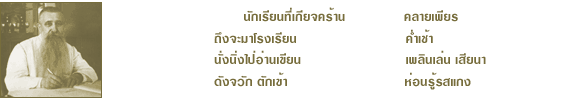
<style>
.page{position:relative;width:575px;height:100px;background:#ffffff}
.page>*{position:absolute;margin:0}
.t1{font:18px "DSELardPhrao";letter-spacing:0.01em;color:#776d3c}
</style>
<div class="page">
<p class="t1" style="left:214px;top:7px;width:272px;height:83px">¹Ñ¡àÃÕÂ¹·Õèà¡ÕÂ¨¤ÃéÒ¹              ¤ÅÒÂà¾ÕÂÃ<br> ¶Ö§¨ÐÁÒâÃ§àÃÕÂ¹                          ¤èÓàªéÒ<br> ¹Ñè§¹Ôè§ä»èÍèÒ¹à¢ÕÂ¹                         à¾ÅÔ¹àÅè¹ àÊÕÂ¹Ò<br> ´Ñ§¨ÇÑ¡ µÑ¡à¢éÒ                            ËèÍ¹ÃÙéÃÊá¡§</p>
</div>
